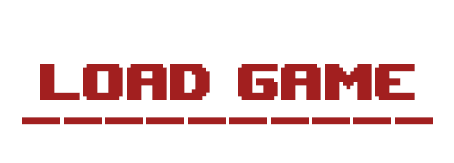
<style>
.page{position:relative;width:454px;height:163px;background:#ffffff}
.page>*{position:absolute;margin:0}
.t1{font:72px "UpheavalTT-BRK-";color:#a21f1f}
.t2{font:69px "UpheavalTT-BRK-";color:#a21f1f}
</style>
<div class="page">
<p class="t1" style="left:40px;top:64px;width:375px;height:36px">load GAME</p>
<p class="t2" style="left:22px;top:117px;width:411px;height:8px">----------</p>
</div>
